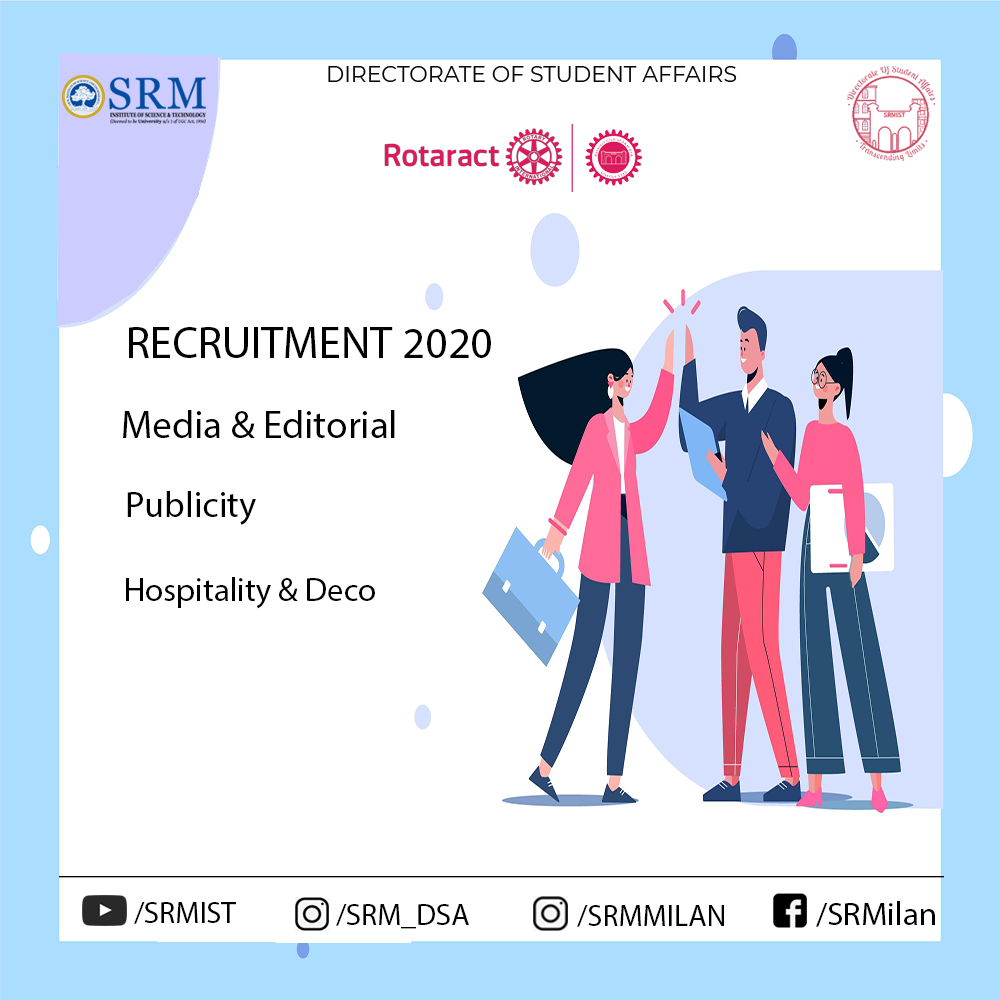
<style>
.page{position:relative;width:1000px;height:1000px;background:#ffffff}
.page>*{position:absolute;margin:0}
.t1{font:44.5px "MyriadPro-Regular";color:#000000}
.t2{font:39.2px "MyriadPro-Regular";color:#000000}
.t3{font:36.4px "MyriadPro-Regular";color:#000000}
.t4{font:32.9px "MyriadPro-Regular";color:#000000}
.t5{font:30px "MyriadPro-Regular";color:#000000}
.t6{font:32.8px "MyriadPro-Regular";color:#000000}
</style>
<div class="page">
<p class="t1" style="left:129px;top:327px;width:362px;height:31px">RECRUITMENT 2020</p>
<p class="t2" style="left:123px;top:410px;width:272px;height:28px">Media &amp; Editorial</p>
<p class="t3" style="left:127px;top:491px;width:129px;height:34px">Publicity</p>
<p class="t4" style="left:126px;top:577px;width:249px;height:32px">Hospitality &amp; Deco</p>
<p class="t5" style="left:59px;top:876px;width:885px;height:2px">___________________________________________________________</p>
<p class="t5" style="left:134px;top:902px;width:102px;height:22px">/SRMIST</p>
<p class="t5" style="left:336px;top:904px;width:133px;height:25px">/SRM_DSA</p>
<p class="t5" style="left:577px;top:905px;width:147px;height:22px">/SRMMILAN</p>
<p class="t6" style="left:816px;top:901px;width:119px;height:26px">/SRMilan</p>
</div>
